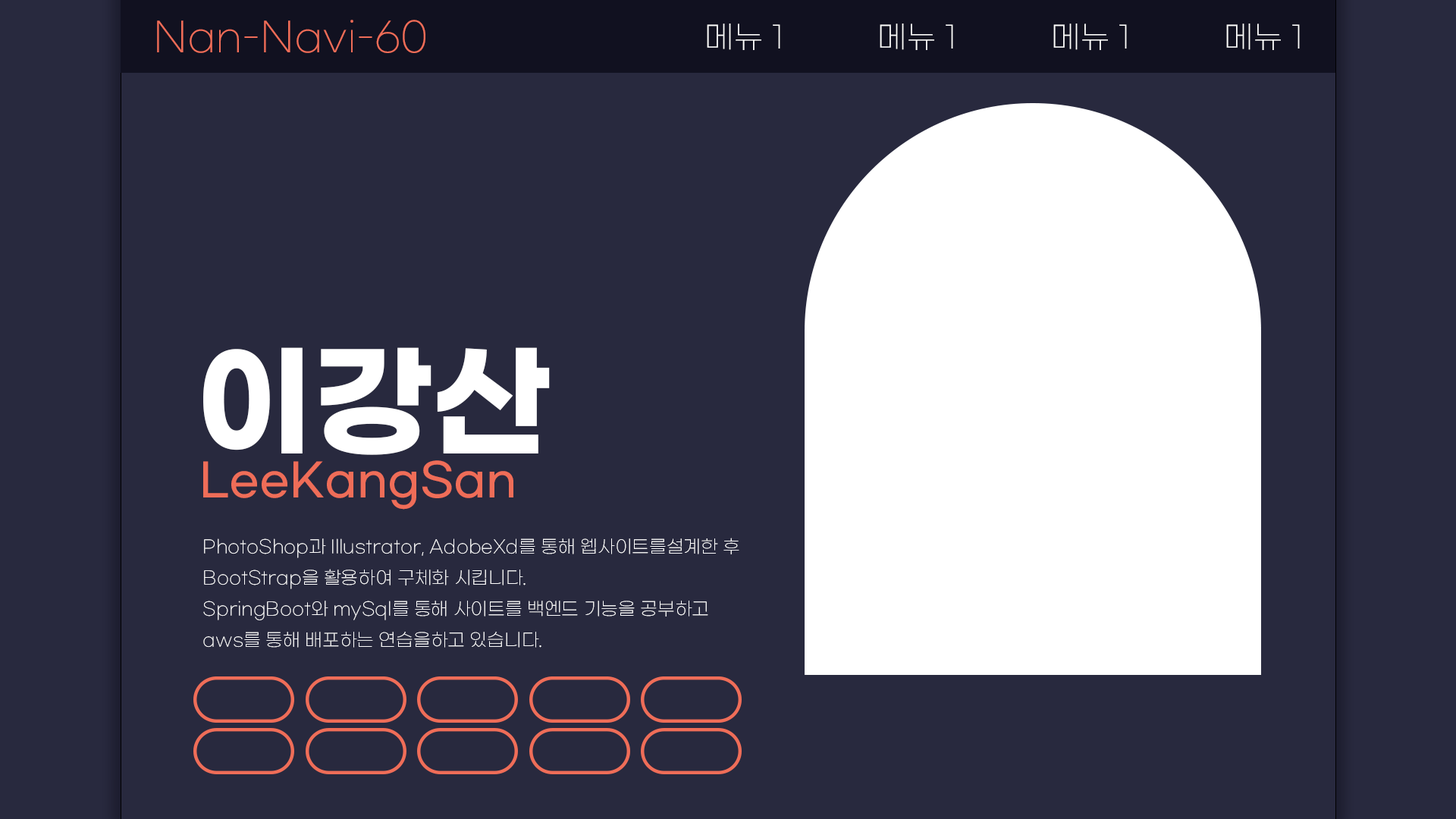
<style>
.page{position:relative;width:1456px;height:819px;background:#28293e}
.page>*{position:absolute;margin:0}
.t1{font:40.2px "GmarketSansLight";color:#ef6d58}
.t2{font:30.3px "GmarketSansLight";color:#ffffff}
.t3{font:123.7px "GmarketSansBold";color:#ffffff}
.t4{font:45px "GmarketSansMedium";color:#ef6d58}
.t5{font:17.9px "GmarketSansLight";color:#ffffff}
</style>
<div class="page">
<p class="t1" style="left:157px;top:20px;width:268px;height:33px">Nan-Navi-60</p>
<p class="t2" style="left:707px;top:24px;width:73px;height:26px">메뉴 1</p>
<p class="t2" style="left:880px;top:24px;width:73px;height:26px">메뉴 1</p>
<p class="t2" style="left:1053px;top:24px;width:74px;height:26px">메뉴 1</p>
<p class="t2" style="left:1226px;top:24px;width:74px;height:26px">메뉴 1</p>
<p class="t3" style="left:203px;top:347px;width:347px;height:108px">이강산</p>
<p class="t4" style="left:203px;top:460px;width:310px;height:50px">LeeKangSan</p>
<p class="t5" style="left:203px;top:538px;width:536px;height:110px">PhotoShop과 Illustrator, AdobeXd를 통해 웹사이트를설계한 후<br>BootStrap을 활용하여 구체화 시킵니다.<br>SpringBoot와 mySql를 통해 사이트를 백엔드 기능을 공부하고<br>aws를 통해 배포하는 연습을하고 있습니다.</p>
</div>
